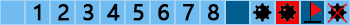
<style>
.page{position:relative;width:350px;height:25px;background:#70bbef}
.page>*{position:absolute;margin:0}
.t1{font:20.8px "MicrosoftYaHei";letter-spacing:0.18em;color:#000000;font-weight:bold}
</style>
<div class="page">
<p class="t1" style="left:34px;top:4px;width:7px;height:17px">1</p>
<p class="t1" style="left:58px;top:4px;width:11px;height:17px">2</p>
<p class="t1" style="left:83px;top:4px;width:11px;height:17px">3</p>
<p class="t1" style="left:107px;top:4px;width:13px;height:17px">4</p>
<p class="t1" style="left:133px;top:4px;width:11px;height:17px">5</p>
<p class="t1" style="left:158px;top:4px;width:12px;height:17px">6</p>
<p class="t1" style="left:183px;top:4px;width:11px;height:17px">7</p>
<p class="t1" style="left:207px;top:4px;width:13px;height:17px">8</p>
</div>
